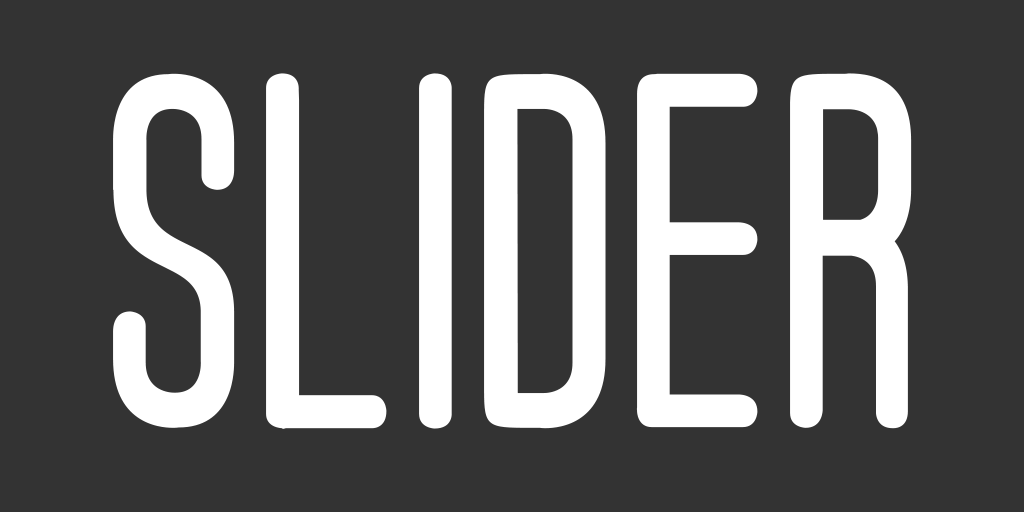
<style>
.page{position:relative;width:1024px;height:512px;background:#333333}
.page>*{position:absolute;margin:0}
.t1{font:357.9px "SodaFountain-Regular";color:#ffffff}
</style>
<div class="page">
<p class="t1" style="left:113px;top:73px;width:799px;height:356px">Slider</p>
</div>
